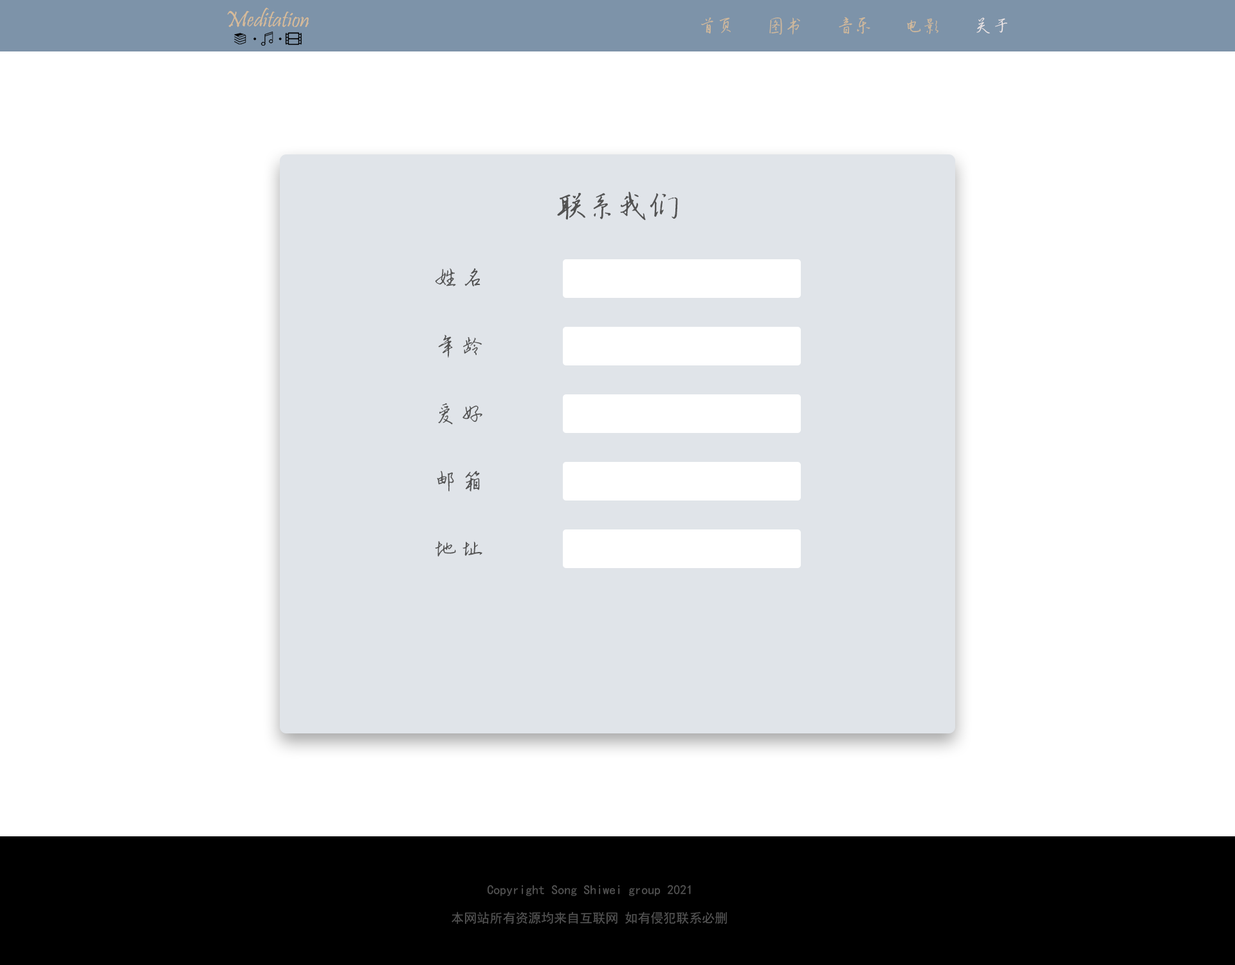
<style>
.page{position:relative;width:1235px;height:965px;background:#ffffff}
.page>*{position:absolute;margin:0}
.t1{font:23.2px "Pristina-Regular";color:#d7bb99}
.t2{font:18px "ÊéÌå·»ÕÔ¾Å½­¸Ö±ÊÐÐÊé";color:#cfb89b}
.t3{font:18px "ÊéÌå·»ÕÔ¾Å½­¸Ö±ÊÐÐÊé";color:#d2b99a}
.t4{font:18px "ÊéÌå·»ÕÔ¾Å½­¸Ö±ÊÐÐÊé";color:#ece5e5}
.t5{font:30.9px "ÊéÌå·»ÕÔ¾Å½­¸Ö±ÊÐÐÊé";color:#535353}
.t6{font:22.5px "ÊéÌå·»ÕÔ¾Å½­¸Ö±ÊÐÐÊé";letter-spacing:0.2em;color:#535353}
.t7{font:12.9px "SimHei";color:#535353}
</style>
<div class="page">
<p class="t1" style="left:227px;top:8px;width:83px;height:19px">Meditation</p>
<p class="t2" style="left:701px;top:17px;width:30px;height:17px">首页</p>
<p class="t2" style="left:770px;top:17px;width:30px;height:18px">图书</p>
<p class="t3" style="left:839px;top:17px;width:32px;height:17px">音乐</p>
<p class="t4" style="left:977px;top:17px;width:31px;height:16px">关于</p>
<p class="t2" style="left:907px;top:18px;width:32px;height:16px">电影</p>
<p class="t5" style="left:557px;top:192px;width:121px;height:29px">联系我们</p>
<p class="t6" style="left:435px;top:268px;width:46px;height:18px">姓名</p>
<p class="t6" style="left:438px;top:335px;width:45px;height:23px">年龄</p>
<p class="t6" style="left:438px;top:403px;width:45px;height:22px">爱好</p>
<p class="t6" style="left:437px;top:471px;width:43px;height:21px">邮箱</p>
<p class="t6" style="left:435px;top:541px;width:48px;height:16px">地址</p>
<p class="t7" style="left:487px;top:885px;width:204px;height:11px">Copyright Song Shiwei group 2021</p>
<p class="t7" style="left:452px;top:912px;width:276px;height:13px">本网站所有资源均来自互联网 如有侵犯联系必删</p>
</div>
